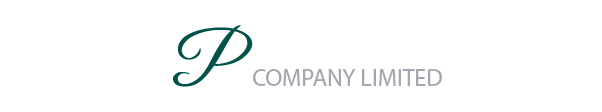
<style>
.page{position:relative;width:602px;height:112px;background:#ffffff}
.page>*{position:absolute;margin:0}
.t1{font:72px "GreatVibes-Regular";color:#015249}
.t2{font:24px "MyriadPro-Regular";color:#a5a5af}
</style>
<div class="page">
<p class="t1" style="left:173px;top:25px;width:80px;height:62px">P</p>
<p class="t2" style="left:253px;top:69px;width:189px;height:17px">COMPANY LIMITED</p>
</div>
